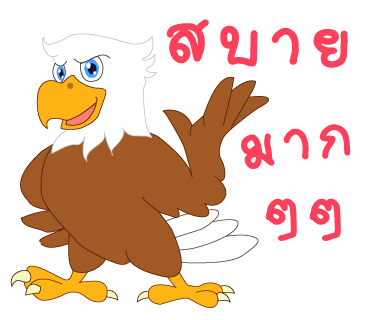
<style>
.page{position:relative;width:370px;height:320px;background:#ffffff}
.page>*{position:absolute;margin:0}
.t1{font:107px "2005_iannnnnMTV";letter-spacing:0.075em;color:#fa405a;scale:1.06 1}
.t2{font:93px "2005_iannnnnMTV";letter-spacing:0.075em;color:#fa405a;scale:1.06 1}
</style>
<div class="page">
<p class="t1" style="left:166px;top:19px;width:182px;height:49px;rotate:1deg">สบาย</p>
<p class="t2" style="left:241px;top:124px;width:110px;height:45px;rotate:-8deg">มาก</p>
<p class="t2" style="left:265px;top:198px;width:76px;height:43px">ๆๆ</p>
</div>
